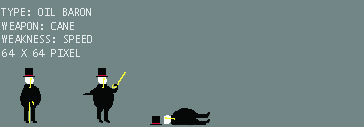
<style>
.page{position:relative;width:364px;height:127px;background:#728686}
.page>*{position:absolute;margin:0}
.t1{font:10px "Monaco";letter-spacing:0.005em;color:#e6ecee;text-transform:uppercase}
</style>
<div class="page">
<p class="t1" style="left:1px;top:8px;width:90px;height:8px">TYPE: oil baron</p>
<p class="t1" style="left:2px;top:22px;width:72px;height:8px">weapon: cane</p>
<p class="t1" style="left:2px;top:35px;width:90px;height:8px">WEAKNESS: SPEED</p>
<p class="t1" style="left:2px;top:49px;width:78px;height:8px">64 x 64 pixel</p>
</div>
